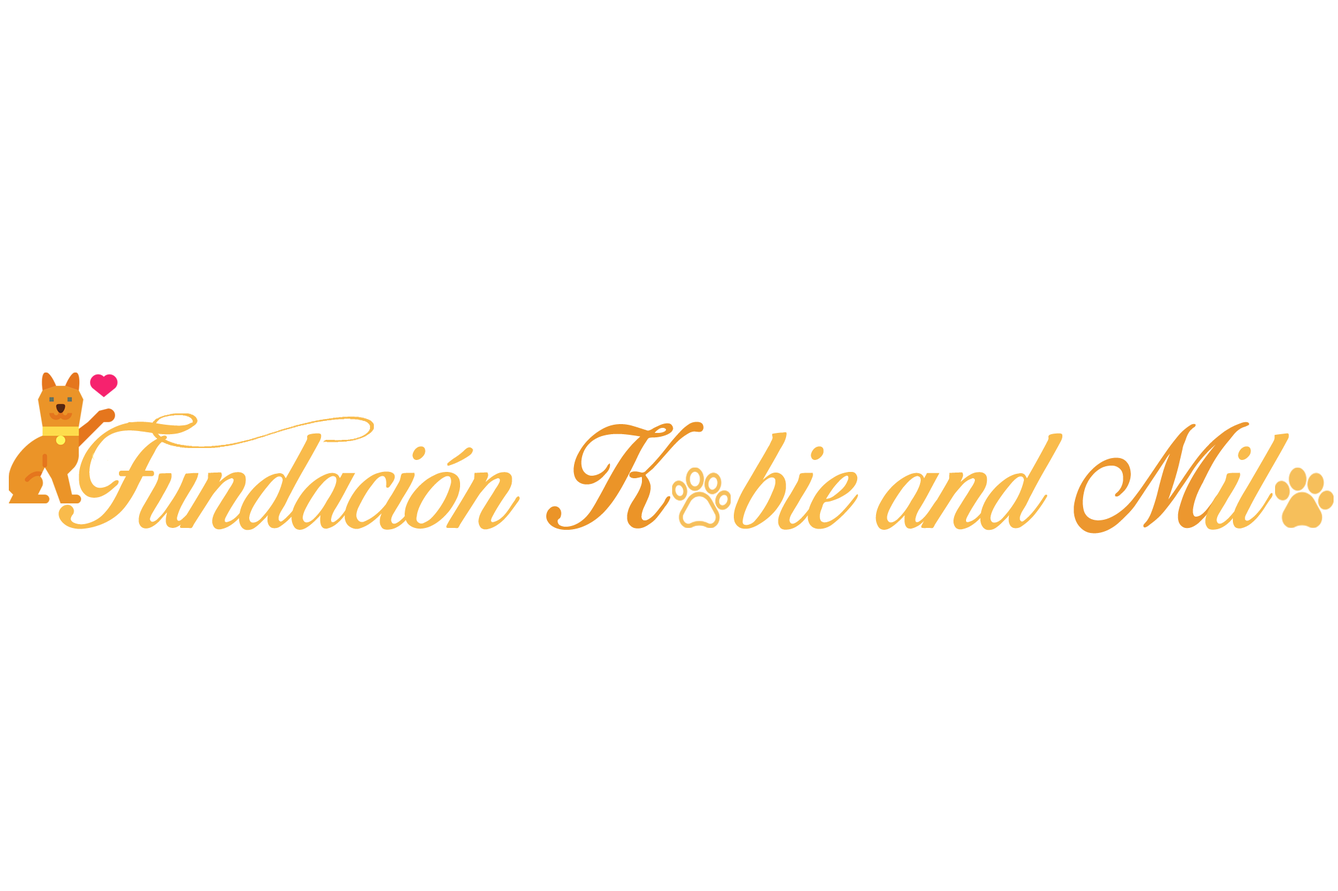
<style>
.page{position:relative;width:1338px;height:891px;background:#ffffff}
.page>*{position:absolute;margin:0}
.t1{font:125.9px "BirdsofParadise-PersonaluseOnly";letter-spacing:0.005em;color:#f9bb4b}
.t2{font:125.9px "BirdsofParadise-PersonaluseOnly";letter-spacing:0.005em;color:#eb9428}
.t3{font:125.9px "BirdsofParadise-PersonaluseOnly";letter-spacing:0.005em;color:#ec972f}
</style>
<div class="page">
<p class="t1" style="left:59px;top:422px;width:1230px;height:112px">Fundación <span class="t2">K</span>  bie and <span class="t3">M</span>il</p>
</div>
